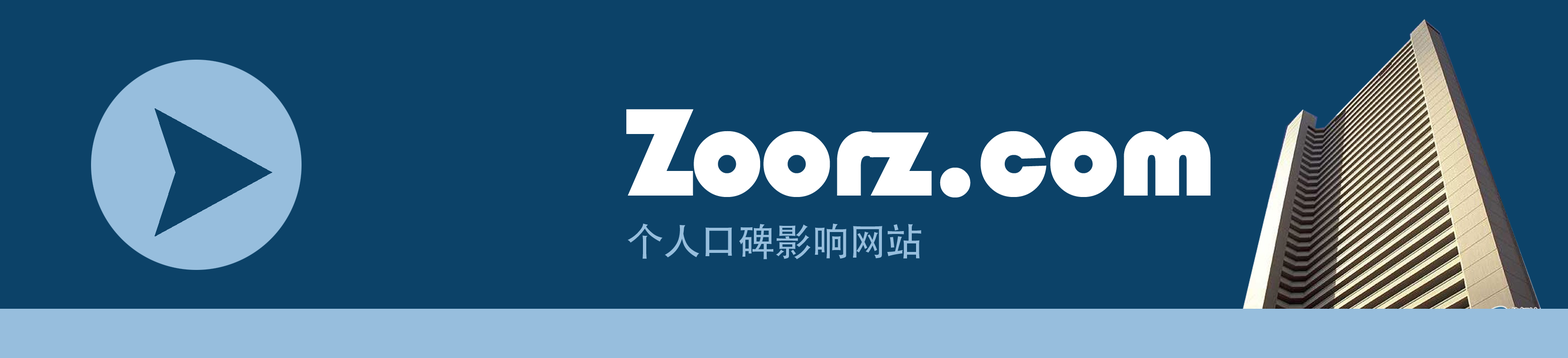
<style>
.page{position:relative;width:1568px;height:358px;background:#0c4268}
.page>*{position:absolute;margin:0}
.t1{font:129.6px/104.3px "Bauhaus93";letter-spacing:-0.02em;color:#ffffff}
.t2{font:113.8px "Bauhaus93";letter-spacing:-0.02em;color:#ffffff}
.t3{font:37.9px "AdobeHeitiStd-Regular";letter-spacing:-0.02em;color:#97bedd}
</style>
<div class="page">
<p class="t1" style="left:626px;top:109px;width:584px;height:89px">Zoorz.com<span class="t2"><br><br><br><br>v</span></p>
<p class="t3" style="left:627px;top:224px;width:294px;height:36px">个人口碑影响网站</p>
</div>
